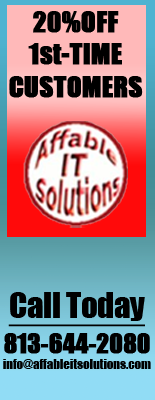
<style>
.page{position:relative;width:155px;height:400px}
.page>*{position:absolute;margin:0}
.t1{font:27px "Impact";letter-spacing:-0.01em;color:#000000;font-weight:bold}
.t2{font:33px "Impact";letter-spacing:-0.01em;color:#000000;text-decoration:underline}
.t3{font:13px "Impact";letter-spacing:-0.01em;color:#000000}
.t4{font:25px "Impact";letter-spacing:-0.01em;color:#000000;font-weight:bold}
</style>
<div class="page">
<p class="t1" style="left:9px;top:11px;width:134px;height:87px;text-align:center">20%OFF<br>1st-TIME<br>CUSTOMERS</p>
<p class="t2" style="left:8px;top:292px;width:137px;height:35px">Call Today</p>
<p class="t3" style="left:3px;top:333px;width:148px;height:36px;text-align:center"><span class="t4">813-644-2080<br></span>info@affableitsolutions.com</p>
</div>
